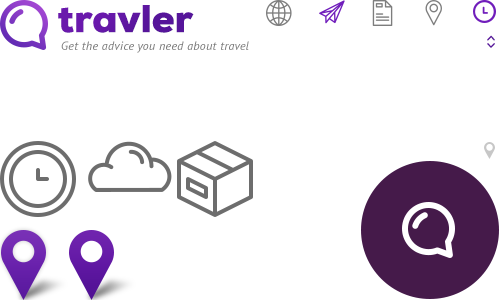
<style>
.page{position:relative;width:500px;height:300px;background:#ffffff}
.page>*{position:absolute;margin:0}
.t1{font:39.1px "NexaBlack";color:#6017a3}
.t2{font:12px "PTSans-Italic";letter-spacing:0.025em;color:#7d7d7d}
.t3{font:11px "Quicksand-Bold";letter-spacing:0.01em;color:#58159b;scale:1.06 1}
</style>
<div class="page">
<p class="t1" style="left:58px;top:5px;width:136px;height:28px">travler</p>
<p class="t2" style="left:61px;top:41px;width:188px;height:12px">Get the advice you need about travel</p>
<p class="t3" style="left:487px;top:35px;width:8px;height:13px;rotate:90deg">&lt;&gt;</p>
</div>
